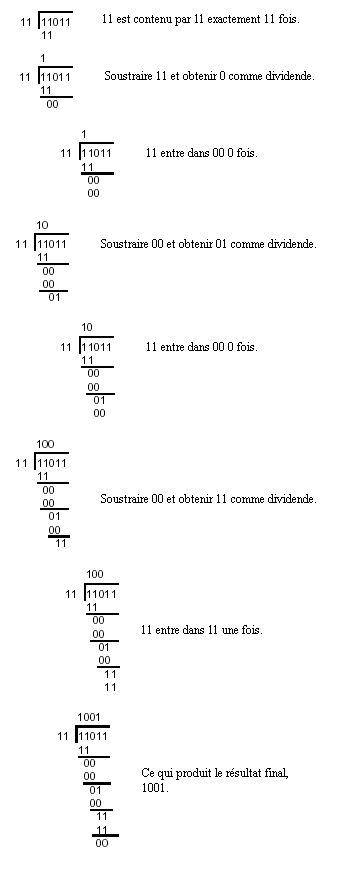
<style>
.page{position:relative;width:340px;height:880px;background:#ffffff}
.page>*{position:absolute;margin:0}
.t1{font:12px "TimesNewRomanPSMT";color:#000000}
</style>
<div class="page">
<p class="t1" style="left:103px;top:14px;width:196px;height:12px">11 est contenu par 11 exactement 11 fois.</p>
<p class="t1" style="left:105px;top:71px;width:209px;height:9px">Soustraire 11 et obtenir 0 comme dividende.</p>
<p class="t1" style="left:147px;top:148px;width:110px;height:9px">11 entre dans 00 0 fois.</p>
<p class="t1" style="left:101px;top:239px;width:215px;height:9px">Soustraire 00 et obtenir 01 comme dividende.</p>
<p class="t1" style="left:147px;top:342px;width:110px;height:9px">11 entre dans 00 0 fois.</p>
<p class="t1" style="left:101px;top:494px;width:215px;height:9px">Soustraire 00 et obtenir 11 comme dividende.</p>
<p class="t1" style="left:142px;top:625px;width:120px;height:9px">11 entre dans 11 une fois.</p>
<p class="t1" style="left:142px;top:768px;width:146px;height:24px">Ce qui produit le résultat final, 1001.</p>
</div>
